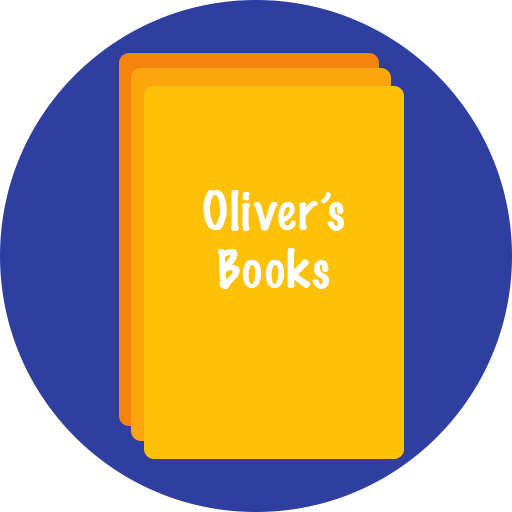
<style>
.page{position:relative;width:512px;height:512px;background:#2f3f9f}
.page>*{position:absolute;margin:0}
.t1{font:48px "MarkerFelt-Thin";color:#ffffff}
</style>
<div class="page">
<p class="t1" style="left:203px;top:190px;width:141px;height:99px;text-align:center">Oliver’s<br>Books</p>
</div>
